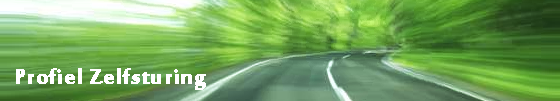
<style>
.page{position:relative;width:560px;height:101px}
.page>*{position:absolute;margin:0}
.t1{font:30px "MoolBoran";letter-spacing:0.01em;color:#ffffff;font-weight:bold;scale:1.05 1}
</style>
<div class="page">
<p class="t1" style="left:16px;top:68px;width:190px;height:22px">Profiel Zelfsturing</p>
</div>
